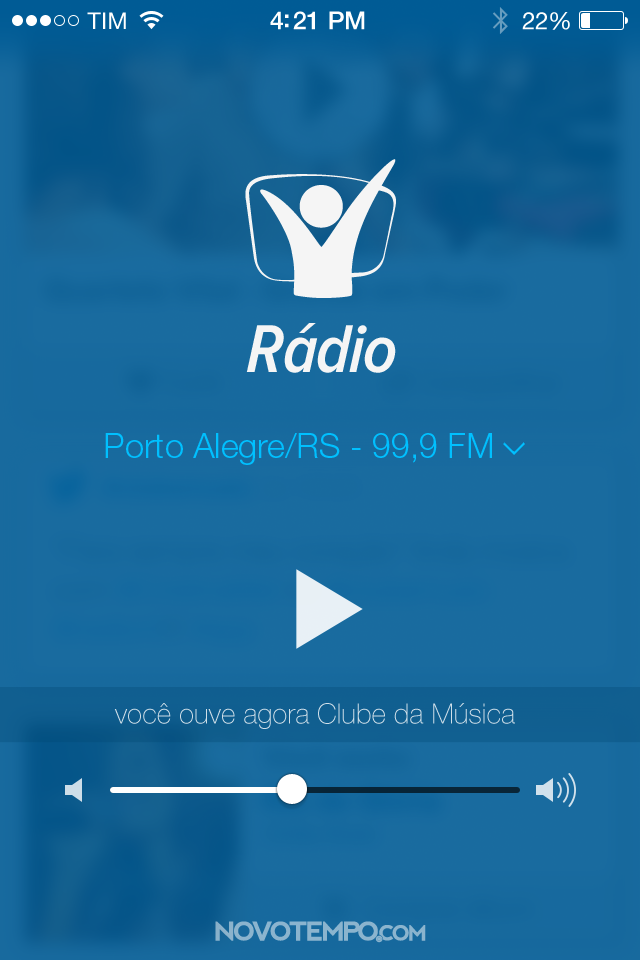
<style>
.page{position:relative;width:640px;height:960px}
.page>*{position:absolute;margin:0}
.t1{font:70px "ProximaNovaCond-SemiboldIt";letter-spacing:-0.02em;color:#f5f5f5}
.t2{font:34px "HelveticaNeueLTStd-Lt";color:#00c0ff}
.t3{font:28px "HelveticaNeueLTStd-Th";color:#cfdfe9}
</style>
<div class="page">
<p class="t1" style="left:246px;top:323px;width:150px;height:50px">Rádio</p>
<p class="t2" style="left:105px;top:433px;width:387px;height:32px">Porto Alegre/RS - 99,9 FM</p>
<p class="t3" style="left:114px;top:703px;width:401px;height:26px">você ouve agora Clube da Música</p>
</div>
